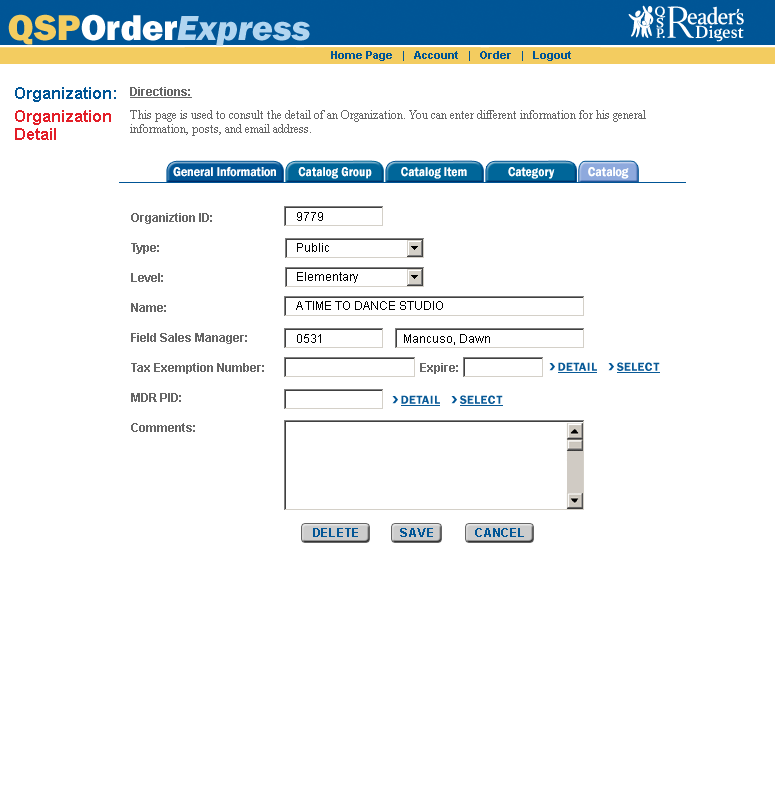
<style>
.page{position:relative;width:775px;height:800px;background:#ffffff}
.page>*{position:absolute;margin:0}
.t1{font:36px "FranklinGothic-HeavyItal";color:#b1d5f0}
.t2{font:36px "FranklinGothic-Heavy";color:#f3cc60}
.t3{font:36px "FranklinGothic-Heavy";color:#ffffff}
.t4{font:11px "Arial-BoldMT";color:#005596}
.t5{font:16px/18px "Arial-BoldMT";color:#005596}
.t6{font:16px/23px "Arial-BoldMT";color:#e31e28}
.t7{font:16px/18px "Arial-BoldMT";color:#e31e28}
.t8{font:12px/14px "TimesNewRomanPSMT";color:#666666}
.t9{font:12px/9px "Arial-BoldMT";color:#666666;text-decoration:underline}
.t10{font:13px "FranklinGothic-Demi";color:#ffffff;scale:0.9 1}
.t11{font:12px/30px "Arial-BoldMT";color:#666666}
.t12{font:12px "ArialMT";color:#000000}
.t13{font:12px "Arial-BoldMT";color:#666666}
.t14{font:12px "FranklinGothic-Demi";letter-spacing:0.025em;color:#095a97}
.t15{font:12px "Arial-BoldMT";letter-spacing:0.06em;color:#005596}
</style>
<div class="page">
<p class="t1" style="left:8px;top:14px;width:302px;height:32px"><span class="t2">QSP</span><span class="t3">Order</span>Express</p>
<p class="t4" style="left:331px;top:51px;width:240px;height:10px">Home Page   |   Account   |   Order   |   Logout</p>
<p class="t5" style="left:15px;top:87px;width:101px;height:53px">Organization:  <br><span class="t6">Organization <br></span><span class="t7">Detail</span></p>
<p class="t8" style="left:130px;top:87px;width:516px;height:49px"><span class="t9">Directions:<br><br></span>This page is used to consult the detail of an Organization. You can enter different information for his general <br>information, posts, and email address.</p>
<p class="t10" style="left:173px;top:167px;width:103px;height:10px">General Information</p>
<p class="t10" style="left:173px;top:167px;width:103px;height:10px;opacity:0.5">General Information</p>
<p class="t10" style="left:298px;top:167px;width:74px;height:12px">Catalog Group</p>
<p class="t10" style="left:298px;top:167px;width:74px;height:12px;opacity:0.5">Catalog Group</p>
<p class="t10" style="left:401px;top:167px;width:66px;height:12px">Catalog Item</p>
<p class="t10" style="left:401px;top:167px;width:66px;height:12px;opacity:0.5">Catalog Item</p>
<p class="t10" style="left:508px;top:167px;width:47px;height:12px">Category</p>
<p class="t10" style="left:508px;top:167px;width:47px;height:12px;opacity:0.5">Category</p>
<p class="t10" style="left:588px;top:167px;width:41px;height:12px">Catalog</p>
<p class="t10" style="left:588px;top:167px;width:41px;height:12px;opacity:0.5">Catalog</p>
<p class="t11" style="left:131px;top:213px;width:133px;height:219px">Organiztion ID:<br>Type:<br>Level:<br>Name:<br>Field Sales Manager:<br>Tax Exemption Number:<br>MDR PID:<br>Comments:</p>
<p class="t12" style="left:297px;top:212px;width:26px;height:9px">9779</p>
<p class="t12" style="left:297px;top:243px;width:32px;height:9px">Public</p>
<p class="t12" style="left:297px;top:272px;width:61px;height:11px">Elementary</p>
<p class="t12" style="left:296px;top:301px;width:147px;height:9px">A TIME TO DANCE STUDIO</p>
<p class="t12" style="left:297px;top:334px;width:24px;height:9px">0531</p>
<p class="t12" style="left:404px;top:334px;width:86px;height:11px">Mancuso, Dawn</p>
<p class="t13" style="left:420px;top:363px;width:38px;height:11px">Expire:</p>
<p class="t14" style="left:558px;top:362px;width:39px;height:9px">DETAIL</p>
<p class="t14" style="left:616px;top:362px;width:44px;height:9px">SELECT</p>
<p class="t14" style="left:401px;top:395px;width:39px;height:9px">DETAIL</p>
<p class="t14" style="left:459px;top:395px;width:44px;height:9px">SELECT</p>
<p class="t15" style="left:313px;top:528px;width:45px;height:9px">DELETE</p>
<p class="t15" style="left:400px;top:528px;width:33px;height:9px">SAVE</p>
<p class="t15" style="left:475px;top:528px;width:49px;height:9px">CANCEL</p>
</div>
